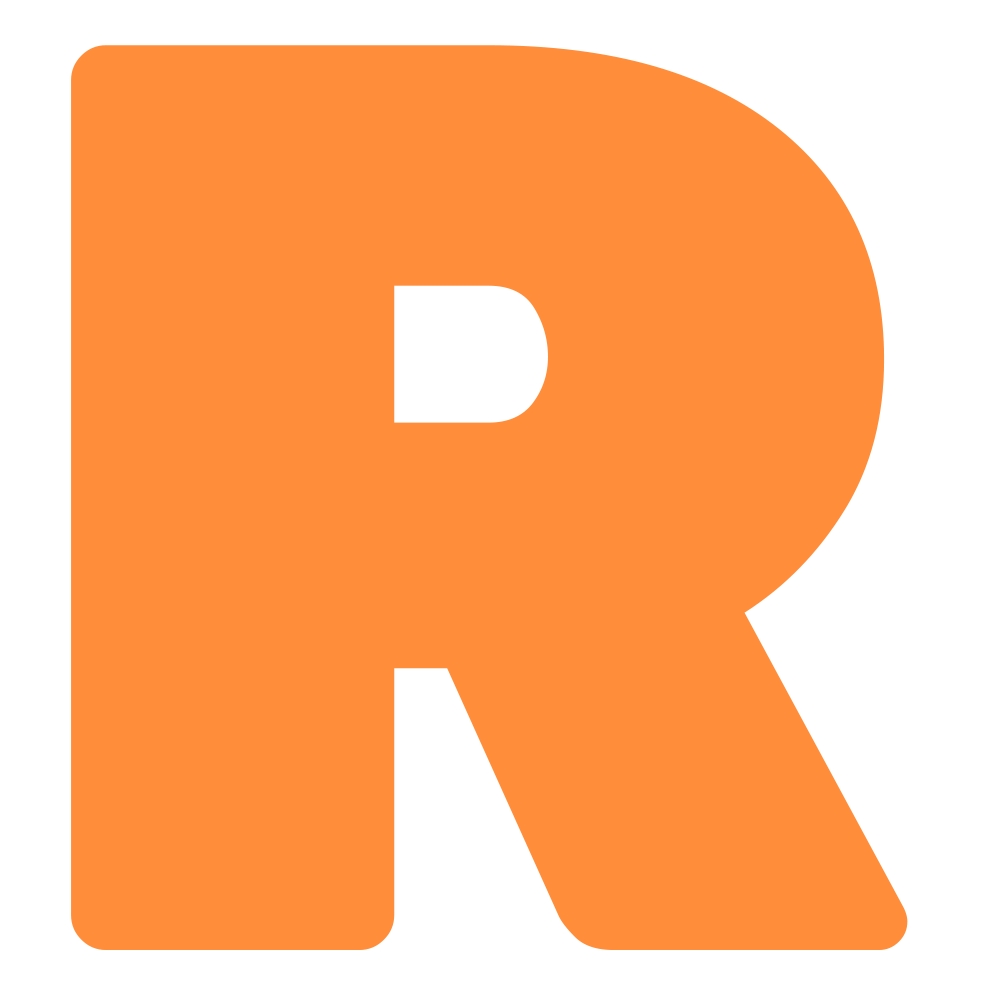
<style>
.page{position:relative;width:1000px;height:1000px;background:#ff8d3a}
.page>*{position:absolute;margin:0}
.t1{font:1292.5px "Rubik-Black";letter-spacing:-0.01em;color:#ff8d3a}
</style>
<div class="page">
<p class="t1" style="left:71px;top:45px;width:837px;height:905px">R</p>
</div>
